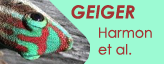
<style>
.page{position:relative;width:164px;height:64px;background:#9cfad3}
.page>*{position:absolute;margin:0}
.t1{font:18px "CenturyGothic-BoldItalic";color:#a53333}
.t2{font:14px "CenturyGothic";color:#a53333}
</style>
<div class="page">
<p class="t1" style="left:71px;top:5px;width:64px;height:14px">GEIGER</p>
<p class="t2" style="left:98px;top:27px;width:54px;height:28px">Harmon<br>et al.</p>
</div>
